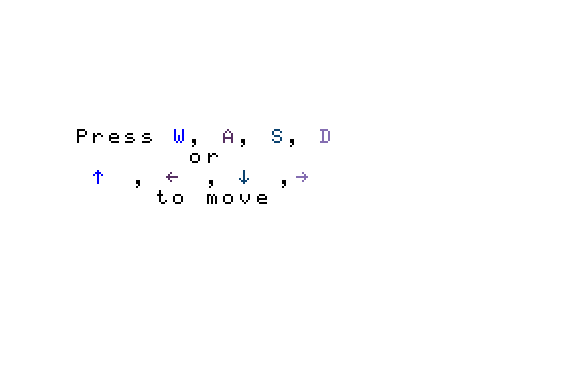
<style>
.page{position:relative;width:576px;height:384px;background:#ffffff}
.page>*{position:absolute;margin:0}
.t1{font:40.6px/20.3px "BK0010";color:#000000}
.t2{font:40.6px/20.3px "BK0010";color:#0000ff}
.t3{font:40.6px/20.3px "BK0010";color:#573063}
.t4{font:40.6px/20.3px "BK0010";color:#0c4370}
.t5{font:40.6px/20.3px "BK0010";color:#846db1}
</style>
<div class="page">
<p class="t1" style="left:77px;top:129px;width:253px;height:75px;text-align:center">Press <span class="t2">W</span>, <span class="t3">A</span>, <span class="t4">S</span>, <span class="t5">D</span> <br>or <br> <span class="t2">↑</span>, <span class="t3">←</span>, <span class="t4">↓</span>,<span class="t5">→ <br></span>to move</p>
</div>
